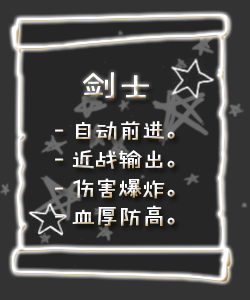
<style>
.page{position:relative;width:250px;height:300px;background:#262626}
.page>*{position:absolute;margin:0}
.t1{font:36px "FZJHJW-GB1-0";letter-spacing:-0.02em}
.t2{font:24px "FZJHJW-GB1-0";letter-spacing:-0.02em}
</style>
<div class="page">
<p class="t1" style="left:82px;top:72px;width:67px;height:26px">剑士</p>
<p class="t2" style="left:55px;top:121px;width:120px;height:105px">- 自动前进。<br>- 近战输出。<br>- 伤害爆炸。<br>- 血厚防高。</p>
</div>
